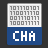
<style>
.page{position:relative;width:48px;height:48px;background:#333333}
.page>*{position:absolute;margin:0}
.t1{font:16px "Pixelated";color:#ffffff}
</style>
<div class="page">
<p class="t1" style="left:13px;top:31px;width:22px;height:10px">CHA</p>
</div>
